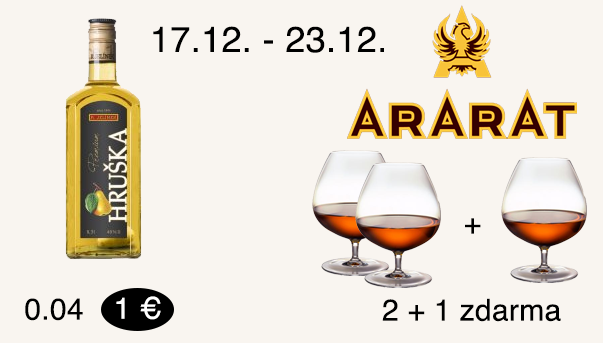
<style>
.page{position:relative;width:603px;height:343px;background:#f9f5f0}
.page>*{position:absolute;margin:0}
.t1{font:36px "Helvetica";letter-spacing:0.01em;color:#000000}
.t2{font:30px "Helvetica";letter-spacing:0.01em;color:#000000}
.t3{font:30px "Helvetica";letter-spacing:0.01em;color:#ffffff}
</style>
<div class="page">
<p class="t1" style="left:153px;top:26px;width:231px;height:27px">17.12. - 23.12.</p>
<p class="t2" style="left:465px;top:218px;width:16px;height:16px">+</p>
<p class="t2" style="left:25px;top:298px;width:58px;height:23px">0.04</p>
<p class="t3" style="left:116px;top:296px;width:45px;height:24px">1 €</p>
<p class="t2" style="left:382px;top:298px;width:179px;height:24px">2 + 1 zdarma</p>
</div>
